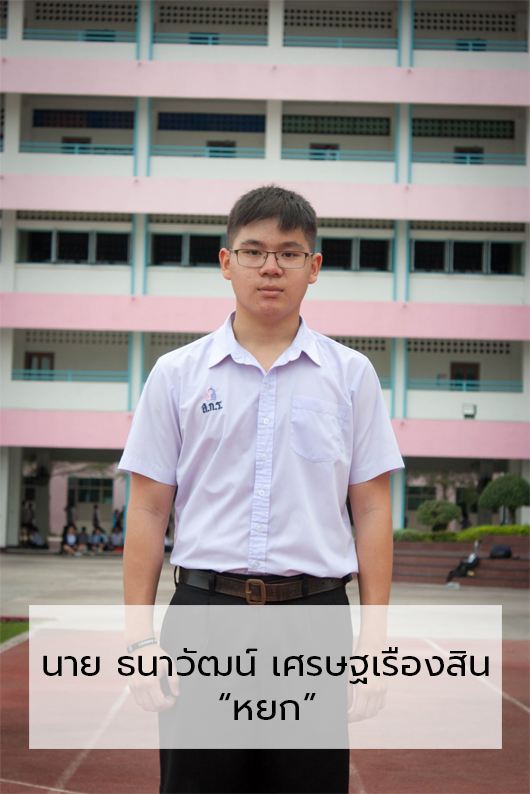
<style>
.page{position:relative;width:530px;height:794px}
.page>*{position:absolute;margin:0}
.t1{font:36.7px "Prompt-Regular";color:#000000}
</style>
<div class="page">
<p class="t1" style="left:43px;top:647px;width:446px;height:73px">นาย ธนาวัฒน์ เศรษฐเรืองสิน<br>             “หยก”</p>
</div>
